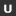
<style>
.page{position:relative;width:16px;height:16px;background:#333333}
.page>*{position:absolute;margin:0}
.t1{font:11.3px "OpenSans-Bold";color:#ffffff;scale:1.09 1}
</style>
<div class="page">
<p class="t1" style="left:4px;top:4px;width:8px;height:9px">U</p>
</div>
